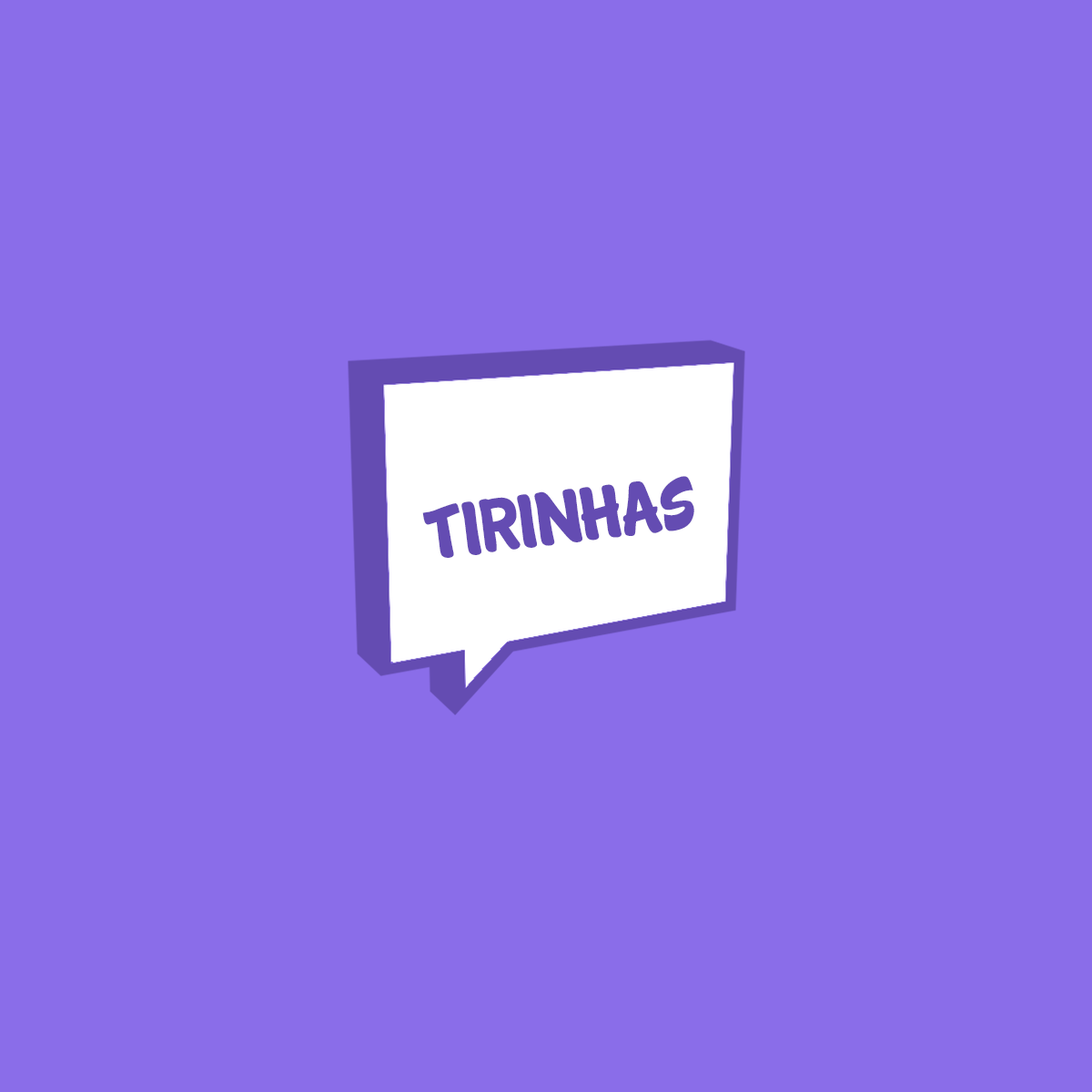
<style>
.page{position:relative;width:1092px;height:1092px;background:#8a6de9}
.page>*{position:absolute;margin:0}
.t1{font:76.4px "Cartwheel";color:#644cb2}
</style>
<div class="page">
<p class="t1" style="left:422px;top:476px;width:272px;height:82px;rotate:-7deg">Tirinhas</p>
</div>
